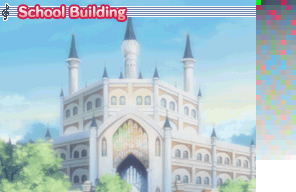
<style>
.page{position:relative;width:296px;height:192px}
.page>*{position:absolute;margin:0}
.t1{font:12px "HummingStd-E";letter-spacing:0.02em}
</style>
<div class="page">
<p class="t1" style="left:19px;top:6px;width:107px;height:14px">School Building</p>
</div>
